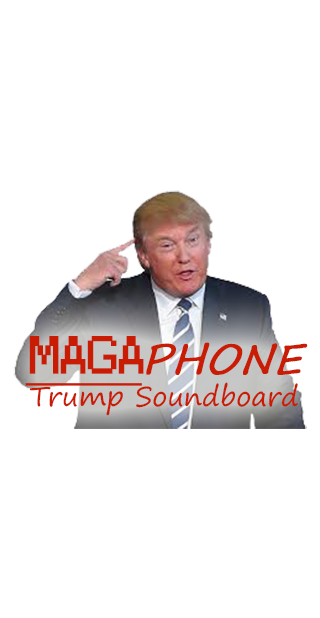
<style>
.page{position:relative;width:320px;height:618px;background:#ffffff}
.page>*{position:absolute;margin:0}
.t1{font:27.2px "SegoePrint";color:#c91c05}
.t2{font:49.4px "Small Fonts";color:#c91c05;font-weight:bold;text-decoration:underline}
.t3{font:40.8px "SegoePrint";color:#c91c05;font-weight:bold;font-style:italic}
</style>
<div class="page">
<p class="t1" style="left:25px;top:336px;width:283px;height:80px;text-align:center"><span class="t2">MAGA</span><span class="t3">PHONE<br></span>Trump Soundboard</p>
</div>
